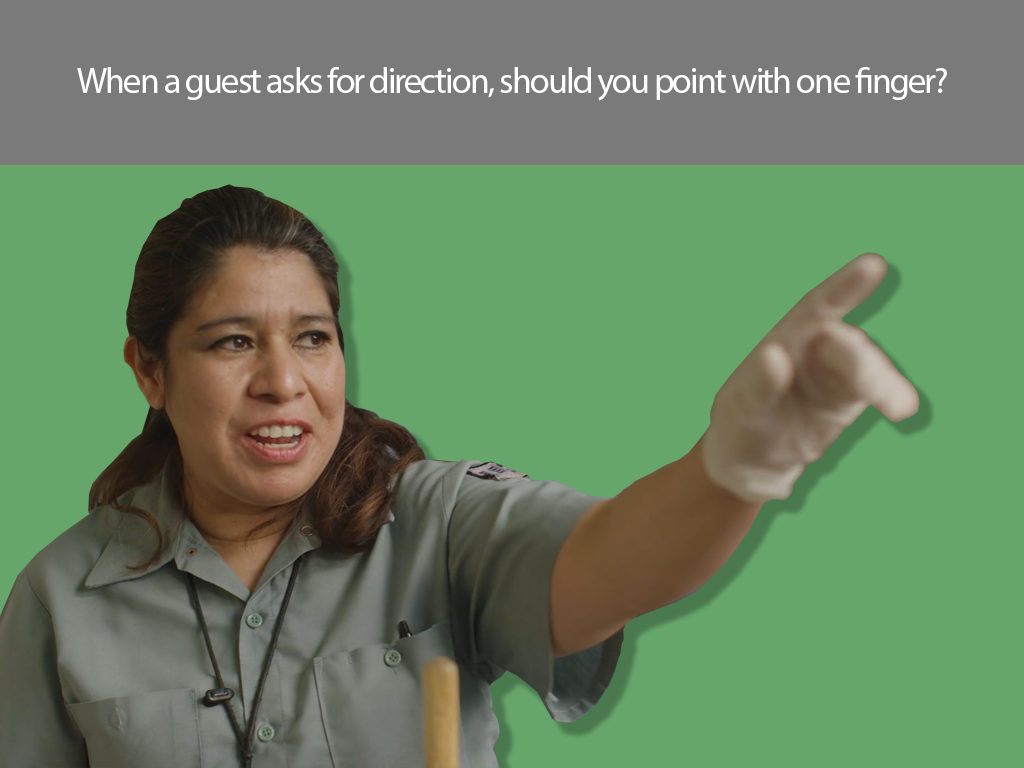
<style>
.page{position:relative;width:1024px;height:768px;background:#66a66b}
.page>*{position:absolute;margin:0}
.t1{font:36px "MyriadPro-Regular";letter-spacing:-0.05em;color:#ffffff}
</style>
<div class="page">
<p class="t1" style="left:77px;top:67px;width:870px;height:34px">When a guest asks for direction, should you point with one finger?</p>
</div>
